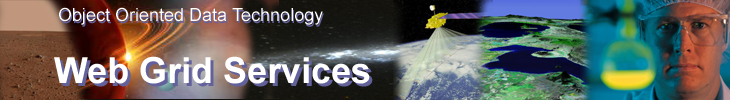
<style>
.page{position:relative;width:730px;height:100px}
.page>*{position:absolute;margin:0}
.t1{font:18px "ArialMT";color:#ffffff}
.t2{font:18px "ArialMT";color:#62619b}
.t3{font:36px "Arial-BoldMT";color:#ffffff}
.t4{font:36px "Arial-BoldMT"}
</style>
<div class="page">
<p class="t1" style="left:59px;top:7px;width:264px;height:18px">Object Oriented Data Technology</p>
<p class="t2" style="left:60px;top:9px;width:264px;height:18px">Object Oriented Data Technology</p>
<p class="t3" style="left:54px;top:56px;width:316px;height:28px">Web Grid Services</p>
<p class="t4" style="left:57px;top:59px;width:316px;height:28px">Web Grid Services</p>
</div>
